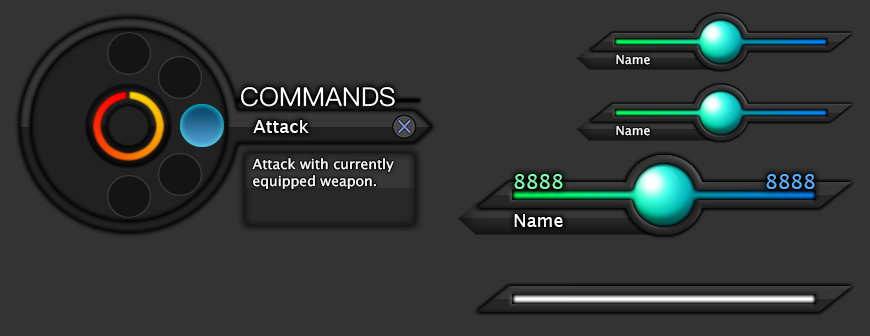
<style>
.page{position:relative;width:870px;height:336px;background:#333333}
.page>*{position:absolute;margin:0}
.t1{font:12.6px "LucidaGrande";color:#ffffff}
.t2{font:18px "LucidaGrande";color:#ffffff}
.t3{font:14px "LucidaGrande";color:#ffffff}
.t4{font:20px "LucidaGrande";color:#7dffab}
.t5{font:20px "LucidaGrande";color:#58afff}
</style>
<div class="page">
<p class="t1" style="left:616px;top:54px;width:34px;height:11px">Name</p>
<p class="t2" style="left:253px;top:120px;width:56px;height:13px">Attack</p>
<p class="t1" style="left:616px;top:125px;width:34px;height:11px">Name</p>
<p class="t3" style="left:252px;top:158px;width:142px;height:31px">Attack with currently<br>equipped weapon.</p>
<p class="t4" style="left:514px;top:174px;width:49px;height:15px">8888</p>
<p class="t5" style="left:766px;top:174px;width:49px;height:15px">8888</p>
<p class="t2" style="left:514px;top:214px;width:49px;height:13px">Name</p>
</div>
